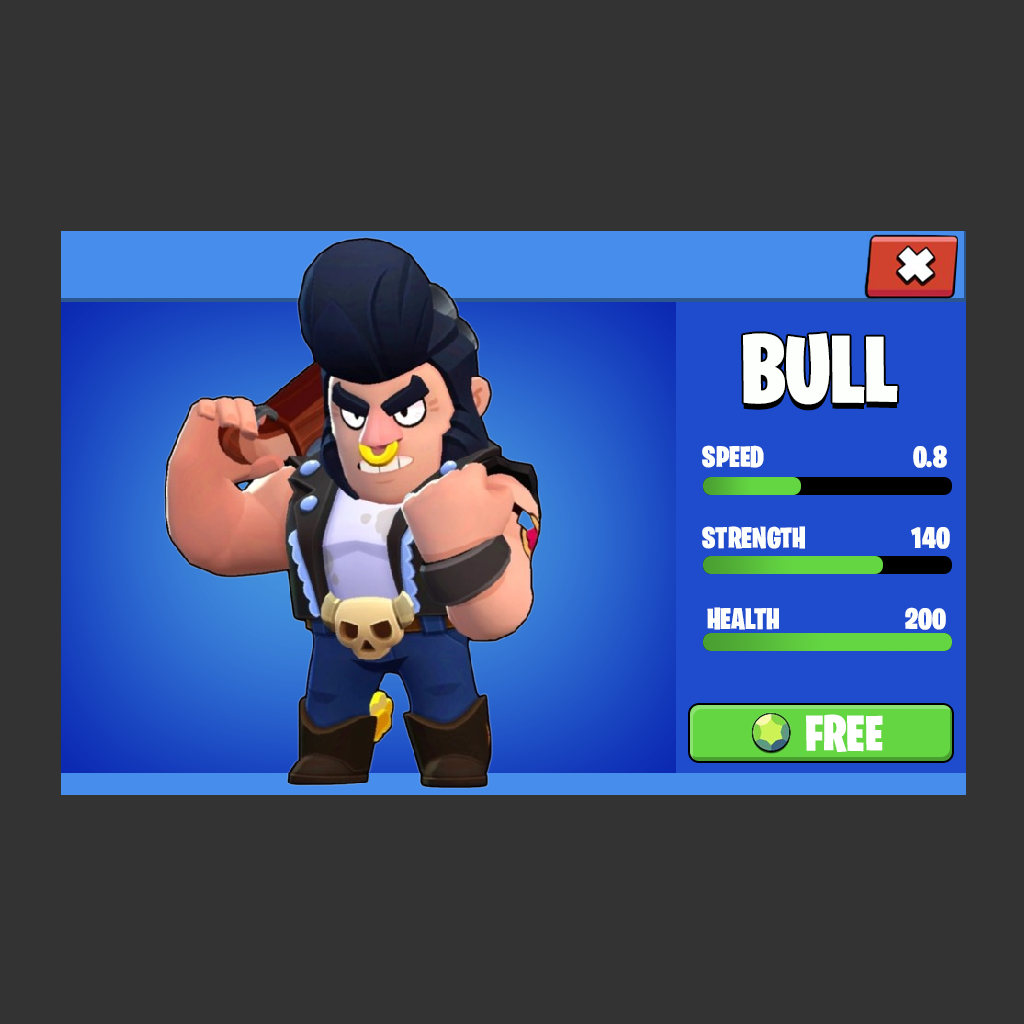
<style>
.page{position:relative;width:1024px;height:1024px;background:#333333}
.page>*{position:absolute;margin:0}
.t1{font:97.7px "BurbankBigCondensed-Black";color:#fdfffd}
.t2{font:30px "BurbankBigCondensed-Black";color:#fdfffd}
</style>
<div class="page">
<p class="t1" style="left:743px;top:333px;width:155px;height:72px">BULL</p>
<p class="t2" style="left:702px;top:445px;width:62px;height:23px">SPEED</p>
<p class="t2" style="left:913px;top:445px;width:34px;height:23px">0.8</p>
<p class="t2" style="left:702px;top:526px;width:103px;height:23px">STRENGTH</p>
<p class="t2" style="left:911px;top:527px;width:39px;height:22px">140</p>
<p class="t2" style="left:707px;top:607px;width:72px;height:23px">HEALTH</p>
<p class="t2" style="left:905px;top:607px;width:41px;height:23px">200</p>
</div>
